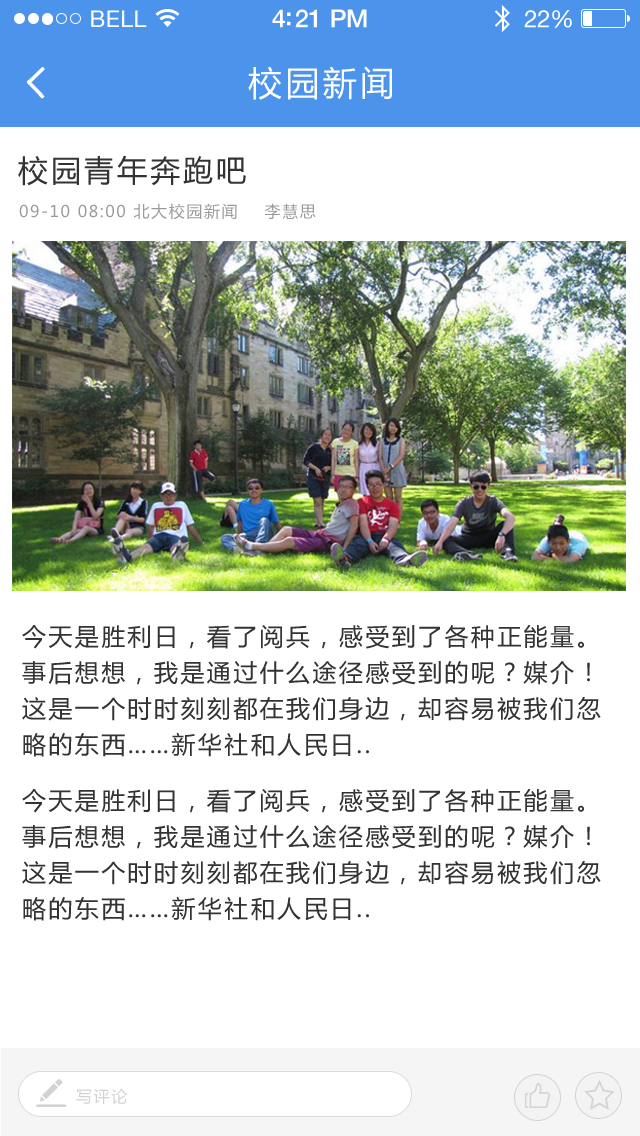
<style>
.page{position:relative;width:640px;height:1136px;background:#ffffff}
.page>*{position:absolute;margin:0}
.t1{font:23px "HelveticaNeue";letter-spacing:0.02em;color:#ffffff}
.t2{font:25px "HelveticaNeue-Medium";letter-spacing:-0.02em;color:#ffffff}
.t3{font:24px "HelveticaNeue";letter-spacing:-0.02em;color:#ffffff}
.t4{font:34px "MicrosoftYaHei";letter-spacing:0.1em;color:#ffffff}
.t5{font:30px "MicrosoftYaHei";letter-spacing:0.1em;color:#333333}
.t6{font:16px "MicrosoftYaHei";letter-spacing:0.1em;color:#9a9a9a}
.t7{font:24px/36px "MicrosoftYaHei";letter-spacing:0.1em;color:#333333}
.t8{font:16px "MicrosoftYaHei";letter-spacing:0.1em;color:#d2d2d2}
</style>
<div class="page">
<p class="t1" style="left:91px;top:10px;width:56px;height:17px">BELL</p>
<p class="t2" style="left:272px;top:9px;width:95px;height:19px">4:21 PM</p>
<p class="t3" style="left:524px;top:10px;width:48px;height:18px">22%</p>
<p class="t4" style="left:248px;top:66px;width:144px;height:34px">校园新闻</p>
<p class="t5" style="left:18px;top:155px;width:228px;height:31px">校园青年奔跑吧</p>
<p class="t6" style="left:19px;top:203px;width:297px;height:17px">09-10 08:00 北大校园新闻    李慧思</p>
<p class="t7" style="left:22px;top:624px;width:579px;height:133px">今天是胜利日，看了阅兵，感受到了各种正能量。<br>事后想想，我是通过什么途径感受到的呢？媒介！<br>这是一个时时刻刻都在我们身边，却容易被我们忽<br>略的东西……新华社和人民日..</p>
<p class="t7" style="left:22px;top:788px;width:579px;height:133px">今天是胜利日，看了阅兵，感受到了各种正能量。<br>事后想想，我是通过什么途径感受到的呢？媒介！<br>这是一个时时刻刻都在我们身边，却容易被我们忽<br>略的东西……新华社和人民日..</p>
<p class="t8" style="left:76px;top:1088px;width:52px;height:16px">写评论</p>
</div>
